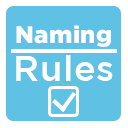
<style>
.page{position:relative;width:128px;height:128px;background:#5fc1e4}
.page>*{position:absolute;margin:0}
.t1{font:24px "Gotham-Black";letter-spacing:0.02em;color:#ffffff}
.t2{font:36px "Gotham-Medium";letter-spacing:0.02em;color:#ffffff}
</style>
<div class="page">
<p class="t1" style="left:16px;top:25px;width:95px;height:22px">Naming</p>
<p class="t2" style="left:16px;top:55px;width:97px;height:26px">Rules</p>
</div>
